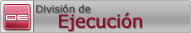
<style>
.page{position:relative;width:191px;height:33px}
.page>*{position:absolute;margin:0}
.t1{font:10px "Verdana";letter-spacing:-0.025em;color:#4b4848;font-weight:bold}
.t2{font:10px "Verdana";letter-spacing:-0.025em;color:#888888;font-weight:bold}
.t3{font:11.6px "911Porscha";color:#ffffff}
.t4{font:18px "Verdana";letter-spacing:-0.025em;color:#881811;font-weight:bold}
.t5{font:18px "Verdana";letter-spacing:-0.025em;font-weight:bold}
</style>
<div class="page">
<p class="t1" style="left:36px;top:4px;width:55px;height:9px">División de</p>
<p class="t2" style="left:37px;top:5px;width:55px;height:9px">División de</p>
<p class="t3" style="left:6px;top:14px;width:22px;height:7px">DE</p>
<p class="t4" style="left:59px;top:12px;width:83px;height:20px">Ejecución</p>
<p class="t5" style="left:60px;top:13px;width:83px;height:20px">Ejecución</p>
</div>
